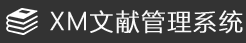
<style>
.page{position:relative;width:246px;height:43px;background:#333333}
.page>*{position:absolute;margin:0}
.t1{font:24px "MicrosoftYaHeiUILight";letter-spacing:0.05em;color:#fafafa;font-weight:bold}
</style>
<div class="page">
<p class="t1" style="left:50px;top:10px;width:193px;height:24px">XM文献管理系统</p>
</div>
